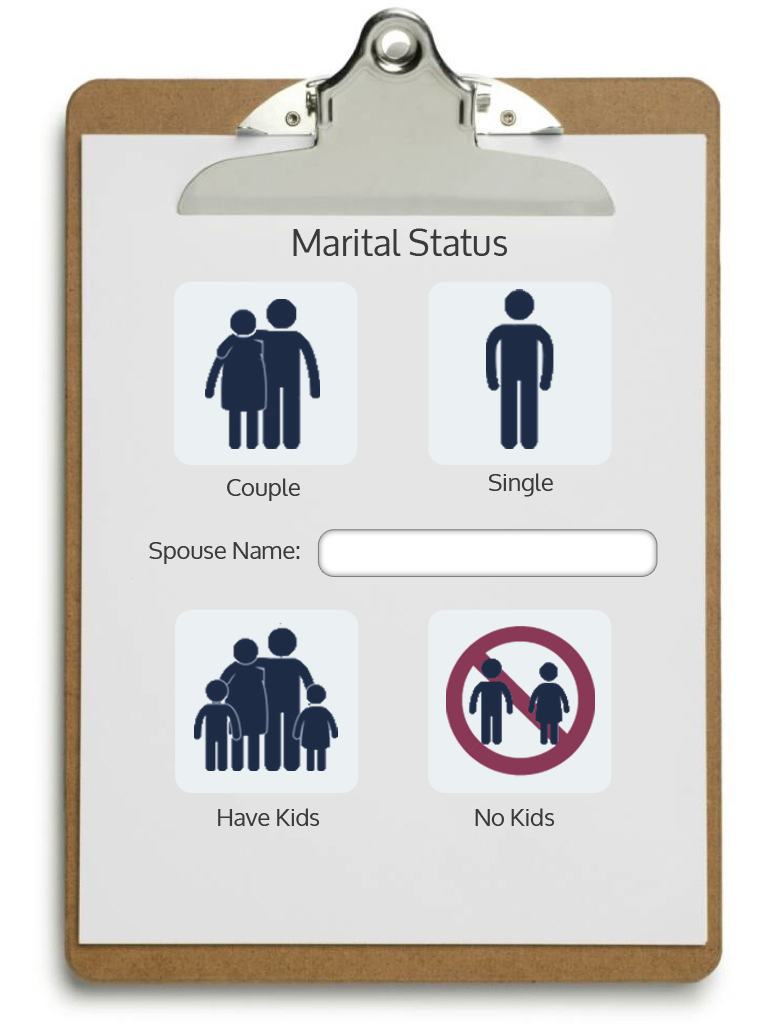
<style>
.page{position:relative;width:768px;height:1024px}
.page>*{position:absolute;margin:0}
.t1{font:36px "Oxygen";color:#3a3a3a}
.t2{font:24px "Oxygen";color:#3a3a3a}
</style>
<div class="page">
<p class="t1" style="left:293px;top:228px;width:214px;height:28px">Marital Status</p>
<p class="t2" style="left:489px;top:473px;width:64px;height:24px">Single</p>
<p class="t2" style="left:227px;top:478px;width:73px;height:23px">Couple</p>
<p class="t2" style="left:149px;top:542px;width:151px;height:22px">Spouse Name:</p>
<p class="t2" style="left:218px;top:808px;width:102px;height:18px">Have Kids</p>
<p class="t2" style="left:475px;top:808px;width:80px;height:18px">No Kids</p>
</div>
